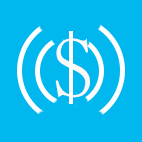
<style>
.page{position:relative;width:142px;height:142px;background:#00b7ee}
.page>*{position:absolute;margin:0}
.t1{font:86px "SimSun";color:#fcf9f9}
</style>
<div class="page">
<p class="t1" style="left:55px;top:38px;width:35px;height:60px">S</p>
</div>
